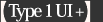
<style>
.page{position:relative;width:103px;height:22px;background:#333333}
.page>*{position:absolute;margin:0}
.t1{font:18px "HeiseiMinStd-W7";letter-spacing:-0.08em;color:#ffffff}
</style>
<div class="page">
<p class="t1" style="left:8px;top:4px;width:76px;height:18px">Type 1 UI +</p>
</div>
